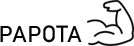
<style>
.page{position:relative;width:134px;height:46px;background:#ffffff}
.page>*{position:absolute;margin:0}
.t1{font:23.3px "Bahnschrift";color:#050802}
</style>
<div class="page">
<p class="t1" style="left:0px;top:25px;width:82px;height:18px">PAPOTA</p>
</div>
